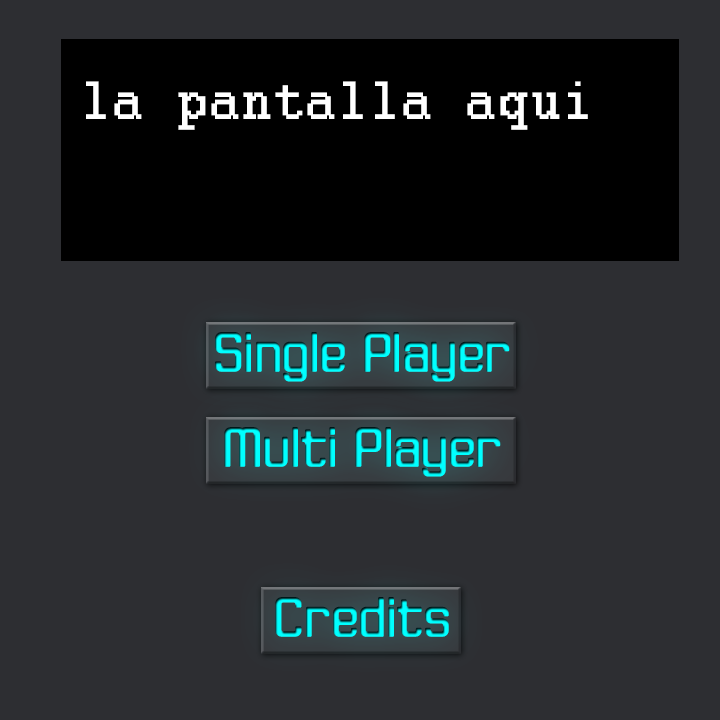
<style>
.page{position:relative;width:720px;height:720px;background:#2d2e32}
.page>*{position:absolute;margin:0}
.t1{font:58.3px "Courier";color:#ffffff;font-weight:bold}
.t2{font:55.9px "JLSDataGothic-RNC";font-weight:bold}
</style>
<div class="page">
<p class="t1" style="left:86px;top:81px;width:502px;height:49px">la pantalla aqui</p>
<p class="t2" style="left:215px;top:332px;width:295px;height:50px">Single Player</p>
<p class="t2" style="left:224px;top:427px;width:277px;height:50px">Multi Player</p>
<p class="t2" style="left:275px;top:597px;width:174px;height:40px">Credits</p>
</div>
